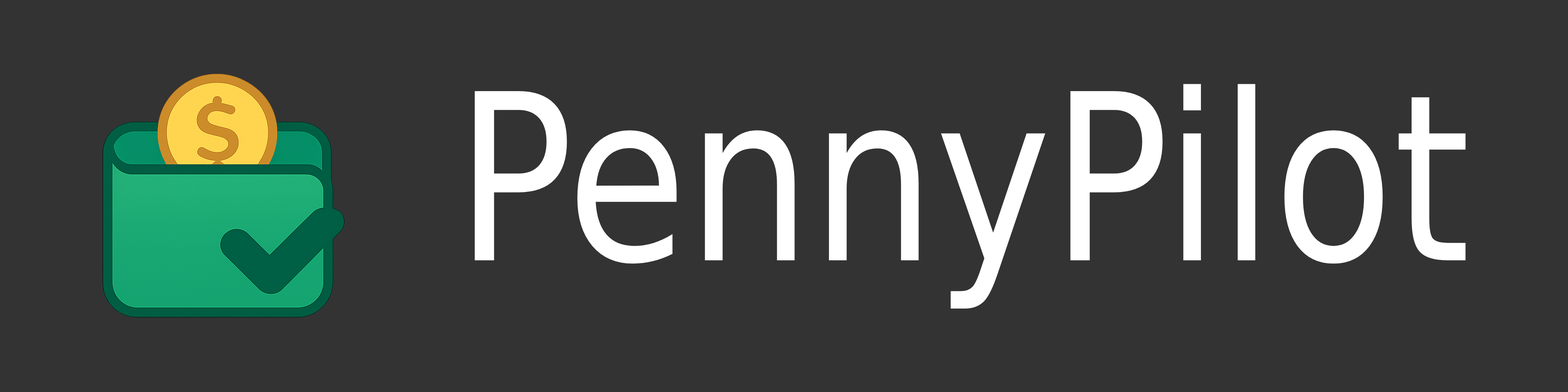
<style>
.page{position:relative;width:1568px;height:392px;background:#333333}
.page>*{position:absolute;margin:0}
.t1{font:232.1px "DejaVuSans";color:#ffffff;scale:0.84 1}
</style>
<div class="page">
<p class="t1" style="left:475px;top:84px;width:991px;height:225px">PennyPilot</p>
</div>
